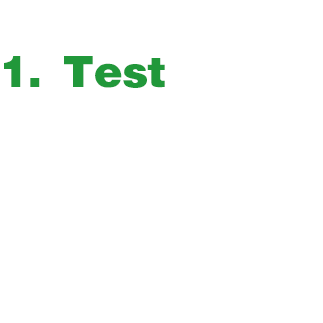
<style>
.page{position:relative;width:323px;height:323px;background:#ffffff}
.page>*{position:absolute;margin:0}
.t1{font:48px "Helvetica-Black-SemiBold";letter-spacing:-0.015em;color:#21983a}
</style>
<div class="page">
<p class="t1" style="left:4px;top:56px;width:161px;height:32px">1. Test</p>
</div>
